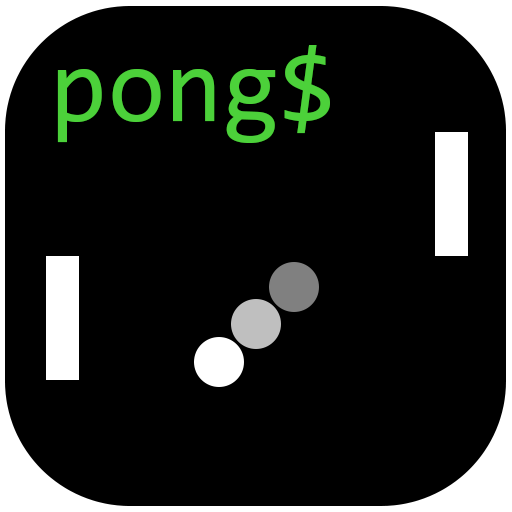
<style>
.page{position:relative;width:512px;height:512px;background:#000000}
.page>*{position:absolute;margin:0}
.t1{font:104.2px "Consolas";color:#4cd13a}
</style>
<div class="page">
<p class="t1" style="left:57px;top:45px;width:273px;height:98px">pong$</p>
</div>
